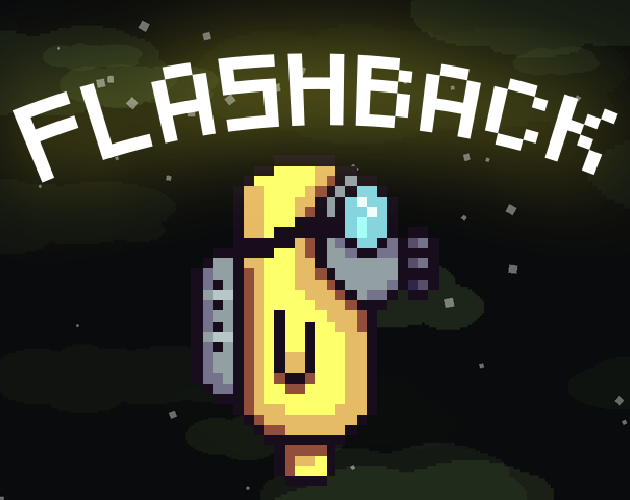
<style>
.page{position:relative;width:630px;height:500px;background:#0a0b0c}
.page>*{position:absolute;margin:0}
.t1{font:59.6px "Pixeled";color:#ffffff}
</style>
<div class="page">
<p class="t1" style="left:12px;top:53px;width:606px;height:130px">FLASHBACK</p>
</div>
